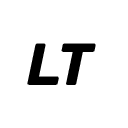
<style>
.page{position:relative;width:128px;height:128px;background:#ffffff}
.page>*{position:absolute;margin:0}
.t1{font:55.2px "Arial-BoldItalicMT";letter-spacing:0.02em;color:#000000}
</style>
<div class="page">
<p class="t1" style="left:28px;top:44px;width:67px;height:40px">LT</p>
</div>
